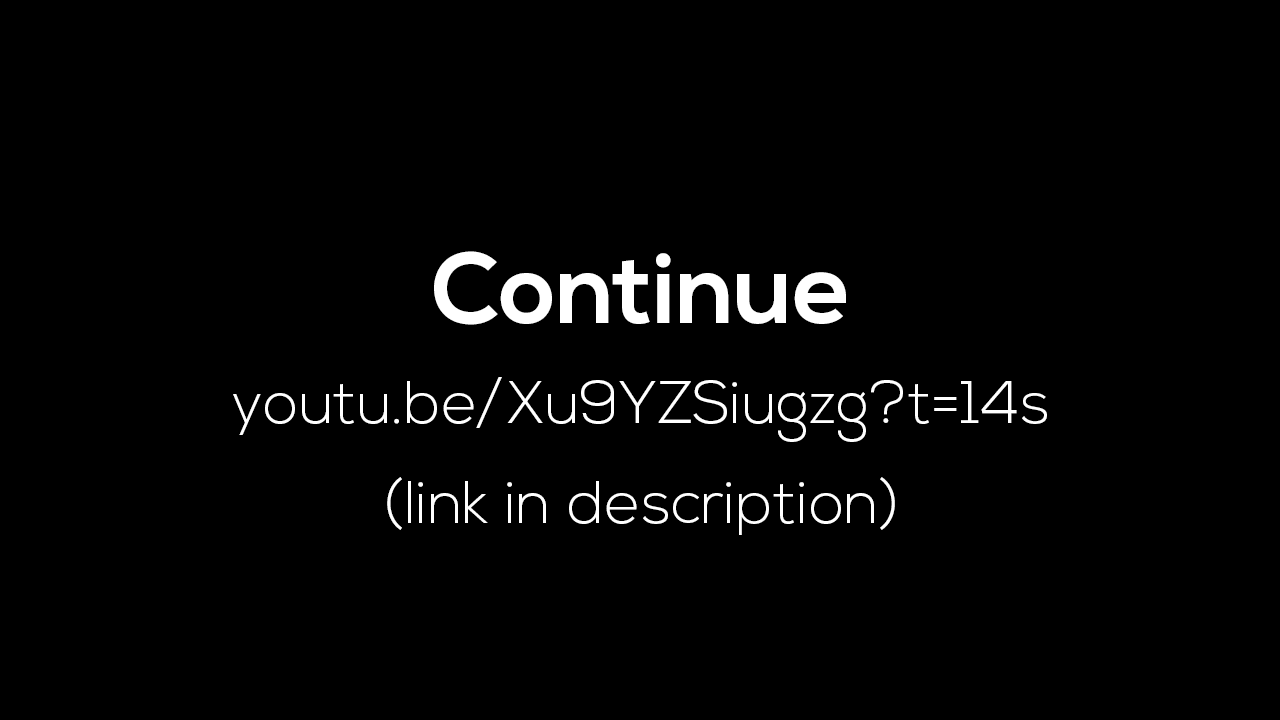
<style>
.page{position:relative;width:1280px;height:720px;background:#000000}
.page>*{position:absolute;margin:0}
.t1{font:60px/100px "NexaLight";color:#ffffff}
.t2{font:100px/100px "NexaBold";color:#ffffff}
</style>
<div class="page">
<p class="t1" style="left:233px;top:251px;width:814px;height:284px;text-align:center"><span class="t2">Continue<br></span>youtu.be/Xu9YZSiugzg?t=14s<br>(link in description)</p>
</div>
